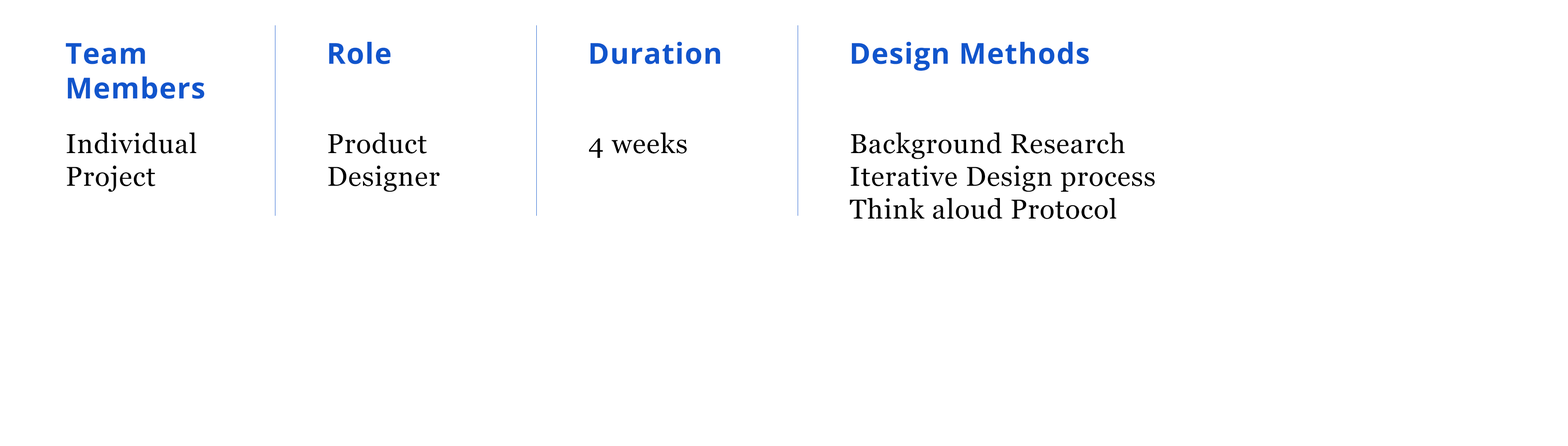
<style>
.page{position:relative;width:1568px;height:446px;background:#ffffff}
.page>*{position:absolute;margin:0}
.t1{font:28.9px "OpenSans-Bold";letter-spacing:0.025em;color:#1155cc}
.t2{font:27.3px "Georgia";letter-spacing:0.025em;color:#000000}
</style>
<div class="page">
<p class="t1" style="left:329px;top:42px;width:62px;height:22px">Role</p>
<p class="t1" style="left:590px;top:42px;width:130px;height:22px">Duration</p>
<p class="t1" style="left:852px;top:42px;width:237px;height:29px">Design Methods</p>
<p class="t1" style="left:66px;top:43px;width:138px;height:56px">Team <br>Members</p>
<p class="t2" style="left:67px;top:132px;width:130px;height:60px">Individual <br>Project</p>
<p class="t2" style="left:328px;top:132px;width:112px;height:60px">Product <br>Designer</p>
<p class="t2" style="left:589px;top:132px;width:98px;height:26px">4 weeks</p>
<p class="t2" style="left:850px;top:132px;width:305px;height:87px">Background Research<br>Iterative Design process<br>Think aloud Protocol</p>
</div>
